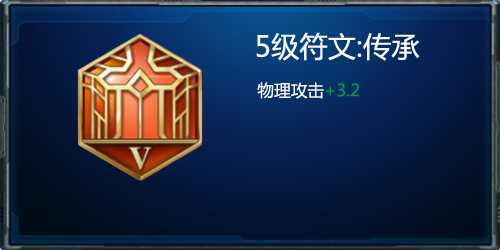
<style>
.page{position:relative;width:500px;height:250px}
.page>*{position:absolute;margin:0}
.t1{font:28.3px "MicrosoftYaHei";color:#f7faf8}
.t2{font:16.7px "MicrosoftYaHei";color:#f7faf8}
.t3{font:16.7px "MicrosoftYaHei";color:#009944}
</style>
<div class="page">
<p class="t1" style="left:256px;top:32px;width:164px;height:67px;text-align:center">5级符文:传承<br><span class="t2">        物理攻击</span><span class="t3">+3.2</span></p>
</div>
